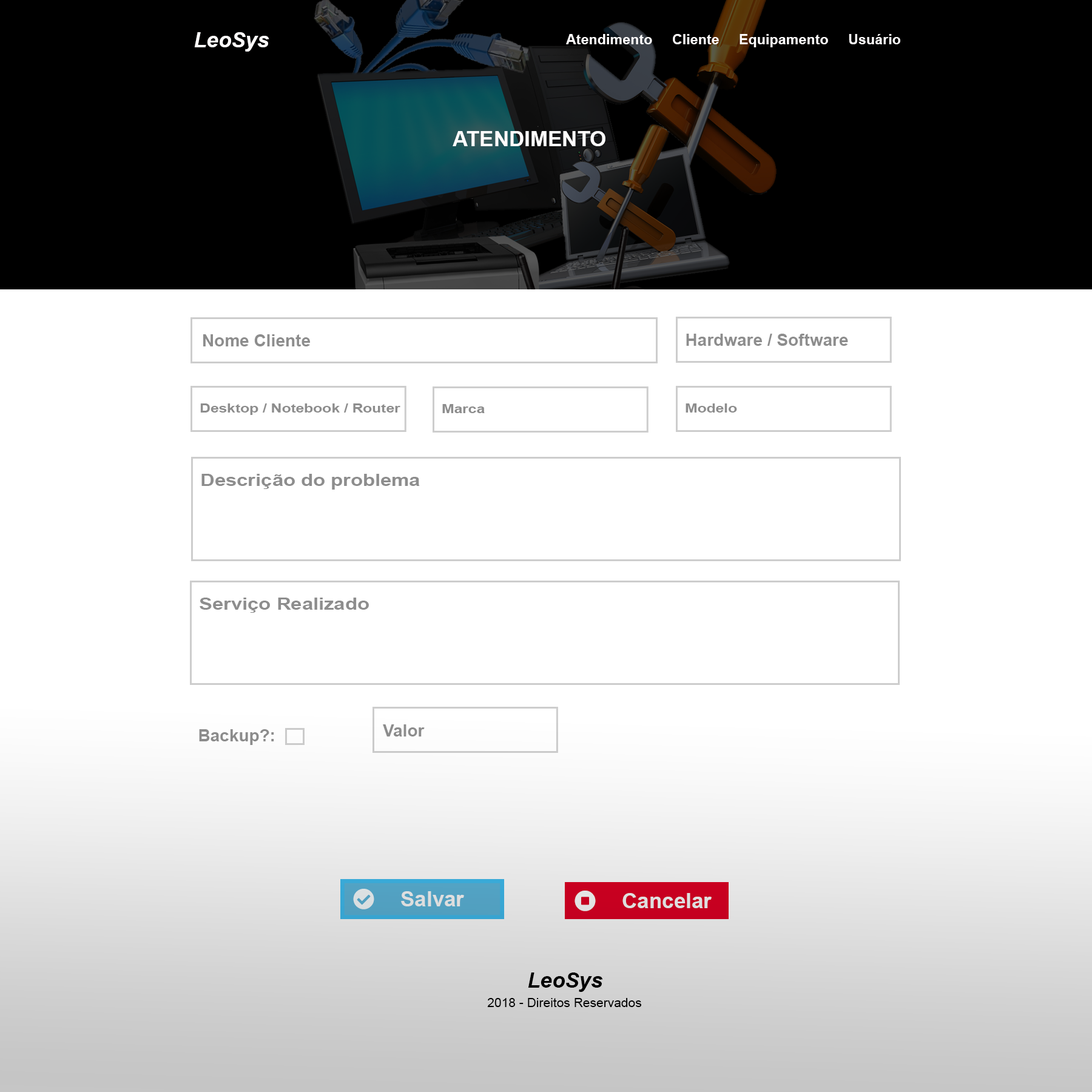
<style>
.page{position:relative;width:1092px;height:1092px;background:#ffffff}
.page>*{position:absolute;margin:0}
.t1{font:36.4px "Arial-BoldItalicMT";color:#fffdfd}
.t2{font:24.3px "Arial-BoldMT";color:#fffdfd}
.t3{font:36.4px "Arial-BoldMT";color:#fffdfd}
.t4{font:29.1px "Arial-BoldMT";color:#8d8d8d}
.t5{font:21.9px "Arial-BoldMT";color:#8d8d8d;scale:1.17 1}
.t6{font:29.2px "Arial-BoldMT";color:#8d8d8d;scale:1.17 1}
.t7{font:36.4px "Arial-BoldMT";color:#dedede}
.t8{font:36.4px "Arial-BoldMT";color:#dfdfdf}
.t9{font:36.4px "Arial-BoldItalicMT";color:#000000}
.t10{font:21.8px "ArialMT";color:#000000}
</style>
<div class="page">
<p class="t1" style="left:194px;top:32px;width:75px;height:20px">LeoSys</p>
<p class="t2" style="left:566px;top:34px;width:334px;height:13px">Atendimento     Cliente     Equipamento     Usuário</p>
<p class="t3" style="left:453px;top:131px;width:152px;height:15px">ATENDIMENTO</p>
<p class="t4" style="left:203px;top:334px;width:107px;height:12px">Nome Cliente</p>
<p class="t4" style="left:686px;top:334px;width:162px;height:12px">Hardware / Software</p>
<p class="t5" style="left:200px;top:403px;width:200px;height:12px">Desktop / Notebook / Router</p>
<p class="t5" style="left:442px;top:404px;width:43px;height:9px">Marca</p>
<p class="t5" style="left:686px;top:403px;width:51px;height:10px">Modelo</p>
<p class="t6" style="left:201px;top:474px;width:219px;height:16px">Descrição do problema</p>
<p class="t6" style="left:200px;top:598px;width:169px;height:15px">Serviço Realizado</p>
<p class="t4" style="left:383px;top:724px;width:42px;height:12px">Valor</p>
<p class="t4" style="left:199px;top:729px;width:75px;height:16px">Backup?:</p>
<p class="t7" style="left:401px;top:891px;width:63px;height:15px">Salvar</p>
<p class="t8" style="left:622px;top:893px;width:90px;height:15px">Cancelar</p>
<p class="t9" style="left:528px;top:972px;width:75px;height:20px">LeoSys</p>
<p class="t10" style="left:487px;top:998px;width:155px;height:9px">2018 - Direitos Reservados</p>
</div>
